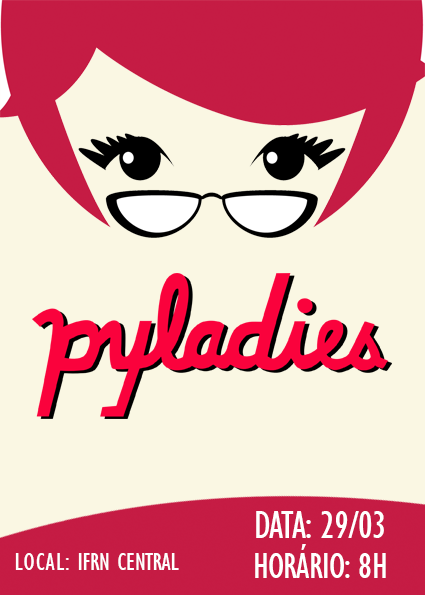
<style>
.page{position:relative;width:425px;height:595px;background:#faf7e3}
.page>*{position:absolute;margin:0}
.t1{font:40px/64px "GillSansMT-Condensed";letter-spacing:-0.02em;color:#ffffff;text-transform:uppercase}
.t2{font:38px/40px "GillSansMT-Condensed";letter-spacing:-0.02em;color:#ffffff;text-transform:uppercase}
.t3{font:26px "GillSansMT-Condensed";letter-spacing:-0.02em;color:#ffffff;text-transform:uppercase}
.t4{font:26px "GillSansMT-Condensed";letter-spacing:0.04em;color:#ffffff;text-transform:uppercase}
</style>
<div class="page">
<p class="t1" style="left:255px;top:511px;width:131px;height:67px;text-align:center">Data: 29/03<br><span class="t2">Horário: 8h</span></p>
<p class="t3" style="left:15px;top:553px;width:164px;height:17px"><span class="t4">Local: </span>IFRN Central</p>
</div>
